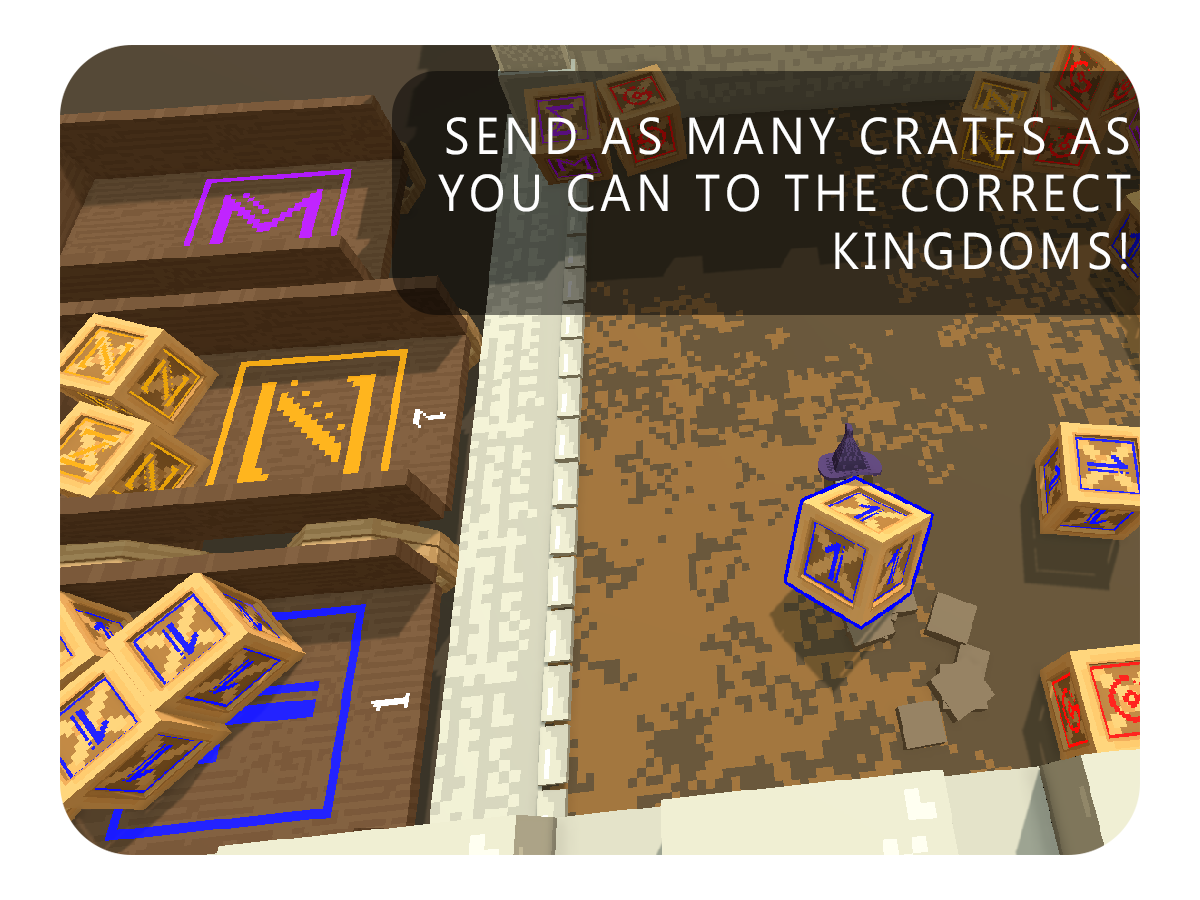
<style>
.page{position:relative;width:1200px;height:900px}
.page>*{position:absolute;margin:0}
.t1{font:51.8px "Ebrima";letter-spacing:0.1em;color:#fefefe;scale:0.93 1}
</style>
<div class="page">
<p class="t1" style="left:438px;top:117px;width:693px;height:153px;text-align:right">SEND AS MANY CRATES AS<br>YOU CAN TO THE CORRECT<br>KINGDOMS!</p>
</div>
